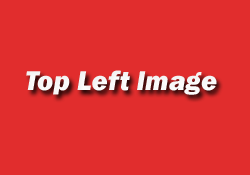
<style>
.page{position:relative;width:250px;height:175px;background:#e12d2d}
.page>*{position:absolute;margin:0}
.t1{font:28px "FranklinGothic-HeavyItalic";color:#ffffff}
</style>
<div class="page">
<p class="t1" style="left:26px;top:70px;width:191px;height:25px">Top Left Image</p>
</div>
